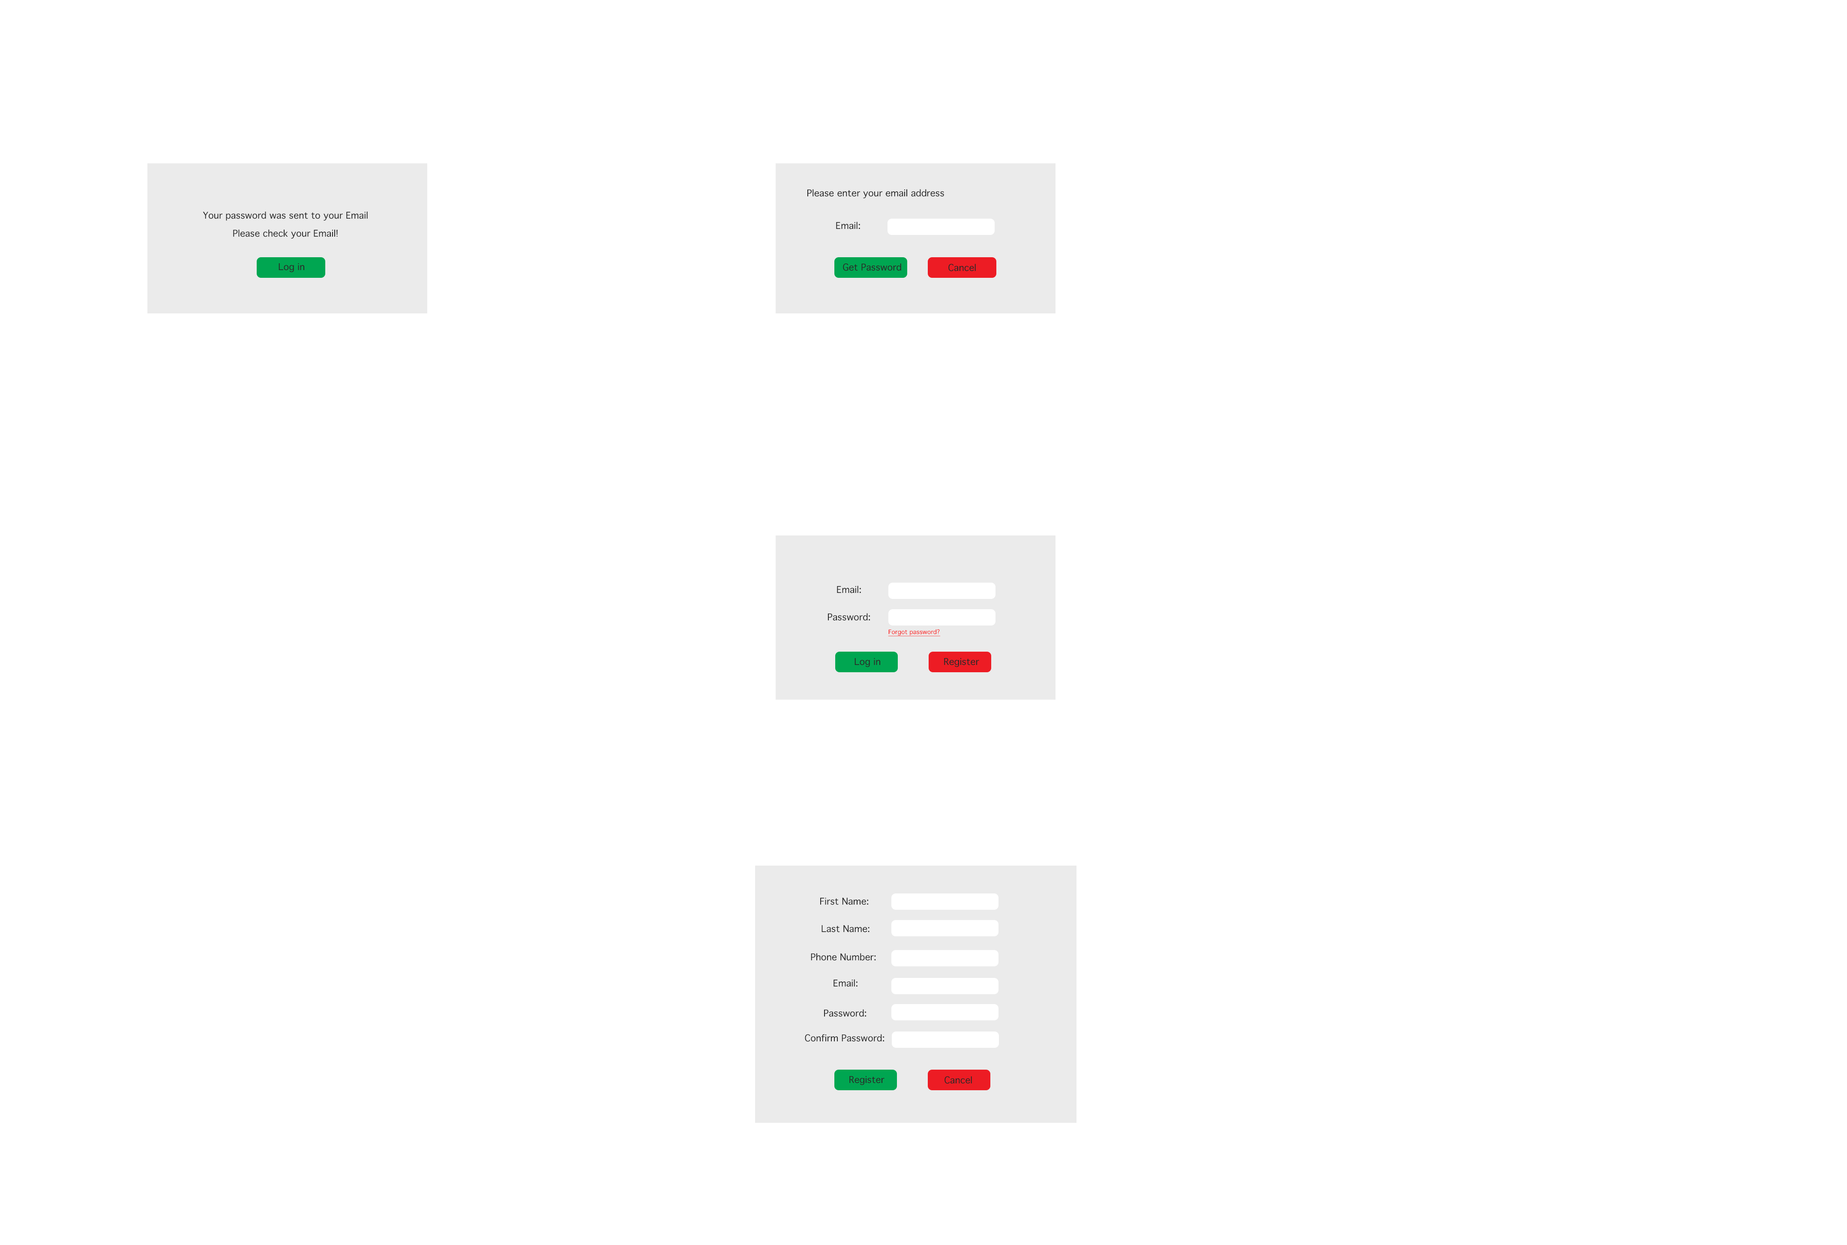
<style>
.page{position:relative;width:1847px;height:1245px;background:#ffffff}
.page>*{position:absolute;margin:0}
.t1{font:9px "Thonburi";color:#282828}
.t2{font:9px/18px "Thonburi";color:#282828}
.t3{font:6px "Thonburi";color:#fc0505;text-decoration:underline}
</style>
<div class="page">
<p class="t1" style="left:807px;top:189px;width:137px;height:9px">Please enter your email address</p>
<p class="t2" style="left:203px;top:211px;width:165px;height:28px;text-align:center">Your password was sent to your Email<br>Please check your Email!</p>
<p class="t1" style="left:836px;top:222px;width:24px;height:7px">Email:</p>
<p class="t1" style="left:279px;top:263px;width:25px;height:9px">Log in</p>
<p class="t1" style="left:843px;top:263px;width:58px;height:8px">Get Password</p>
<p class="t1" style="left:948px;top:264px;width:28px;height:7px">Cancel</p>
<p class="t1" style="left:837px;top:585px;width:24px;height:8px">Email:</p>
<p class="t1" style="left:828px;top:613px;width:42px;height:8px">Password:</p>
<p class="t3" style="left:888px;top:629px;width:52px;height:7px">Forgot password?</p>
<p class="t1" style="left:855px;top:658px;width:25px;height:9px">Log in</p>
<p class="t1" style="left:944px;top:658px;width:35px;height:9px">Register</p>
<p class="t1" style="left:820px;top:897px;width:48px;height:8px">First Name:</p>
<p class="t1" style="left:822px;top:925px;width:48px;height:7px">Last Name:</p>
<p class="t1" style="left:811px;top:953px;width:65px;height:7px">Phone Number:</p>
<p class="t1" style="left:834px;top:979px;width:24px;height:8px">Email:</p>
<p class="t1" style="left:824px;top:1009px;width:42px;height:8px">Password:</p>
<p class="t1" style="left:805px;top:1034px;width:79px;height:7px">Confirm Password:</p>
<p class="t1" style="left:849px;top:1076px;width:36px;height:9px">Register</p>
<p class="t1" style="left:945px;top:1076px;width:27px;height:7px">Cancel</p>
</div>
